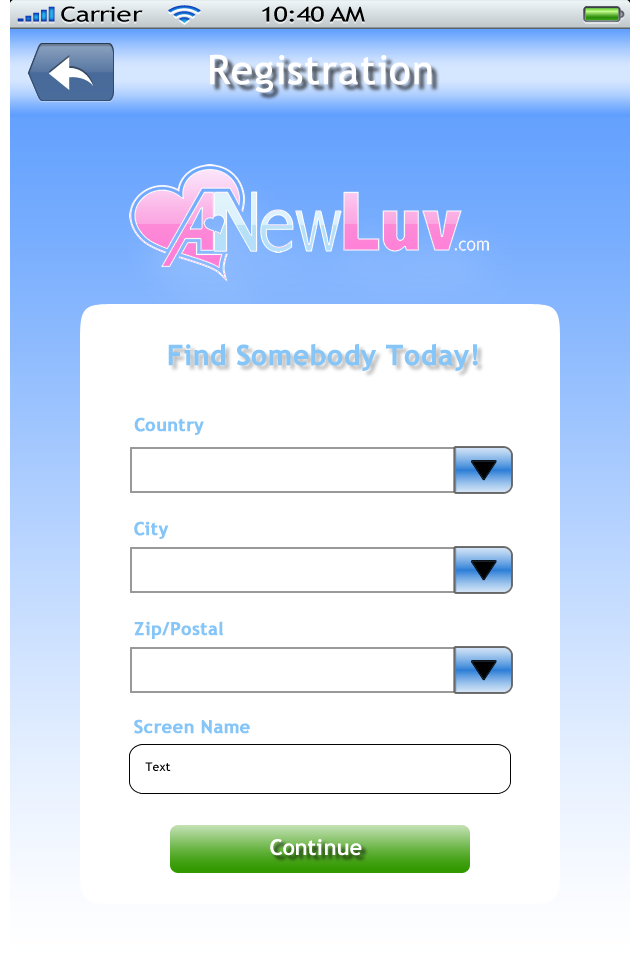
<style>
.page{position:relative;width:640px;height:960px;background:#ffffff}
.page>*{position:absolute;margin:0}
.t1{font:40px "TrebuchetMS";color:#ffffff;font-weight:bold}
.t2{font:28px "TrebuchetMS-Bold";color:#85c5f8;font-weight:bold}
.t3{font:18px "TrebuchetMS-Bold";color:#85c5f8;font-weight:bold}
.t4{font:22px "TrebuchetMS-Bold";color:#ffffff}
</style>
<div class="page">
<p class="t1" style="left:210px;top:54px;width:222px;height:39px">Registration</p>
<p class="t2" style="left:168px;top:343px;width:310px;height:28px">Find Somebody Today!</p>
<p class="t3" style="left:134px;top:417px;width:70px;height:18px">Country</p>
<p class="t3" style="left:134px;top:521px;width:35px;height:18px">City</p>
<p class="t3" style="left:134px;top:621px;width:89px;height:18px">Zip/Postal</p>
<p class="t3" style="left:134px;top:719px;width:116px;height:15px">Screen Name</p>
<p class="t4" style="left:270px;top:839px;width:92px;height:17px">Continue</p>
</div>
